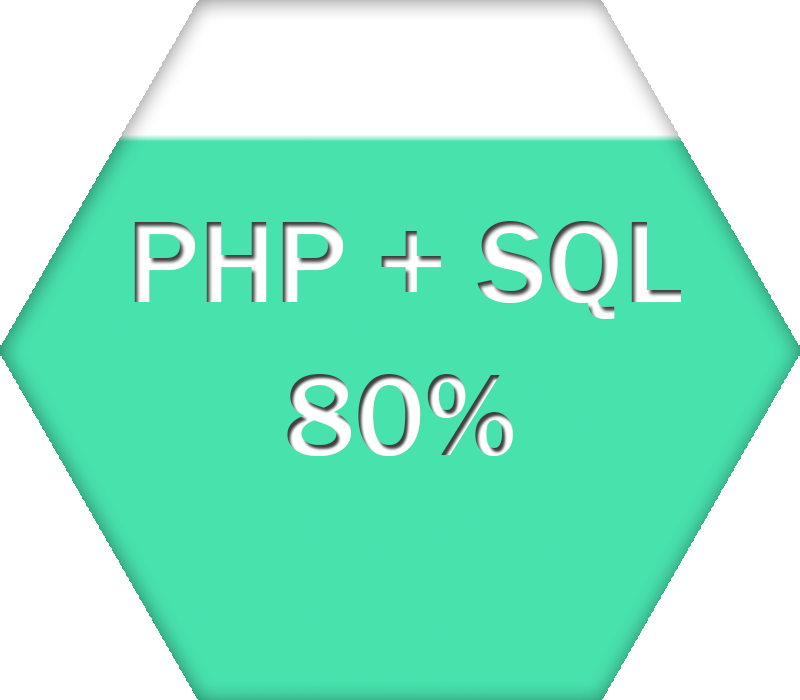
<style>
.page{position:relative;width:800px;height:700px;background:#ffffff}
.page>*{position:absolute;margin:0}
.t1{font:120px "FranklinGothic-Medium";color:#ffffff}
.t2{font:120px "FranklinGothic-Medium"}
</style>
<div class="page">
<p class="t1" style="left:134px;top:221px;width:547px;height:98px">PHP + SQL</p>
<p class="t2" style="left:287px;top:374px;width:226px;height:82px">80%</p>
</div>
